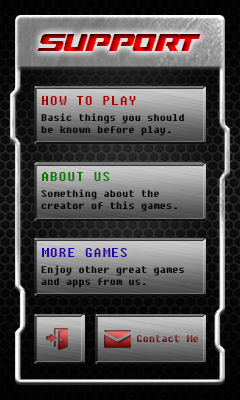
<style>
.page{position:relative;width:240px;height:400px}
.page>*{position:absolute;margin:0}
.t1{font:24px "DreamMMA"}
.t2{font:14px "Fixedsys";color:#ad0101}
.t3{font:10px "Fixedsys";color:#000000}
.t4{font:14px "Fixedsys";color:#067900}
.t5{font:14px "Fixedsys";color:#2b00a5}
.t6{font:10px "Fixedsys"}
</style>
<div class="page">
<p class="t1" style="left:37px;top:34px;width:164px;height:17px">support</p>
<p class="t2" style="left:42px;top:96px;width:94px;height:9px">HOW TO PLAY</p>
<p class="t3" style="left:41px;top:113px;width:143px;height:23px">Basic things you should<br>be known before play.</p>
<p class="t4" style="left:42px;top:172px;width:68px;height:9px">ABOUT US</p>
<p class="t3" style="left:41px;top:189px;width:136px;height:23px">Something about the<br>creator of this games.</p>
<p class="t5" style="left:42px;top:248px;width:85px;height:9px">MORE GAMES</p>
<p class="t3" style="left:41px;top:265px;width:143px;height:23px">Enjoy other great games<br>and apps from us.</p>
<p class="t6" style="left:137px;top:335px;width:62px;height:7px">Contact Me</p>
</div>
